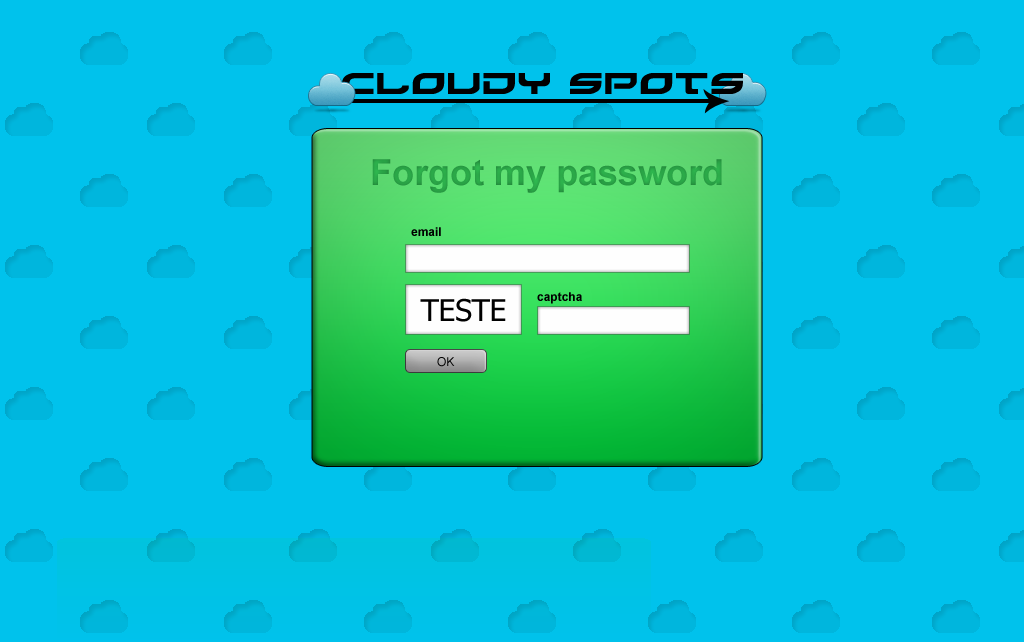
<style>
.page{position:relative;width:1024px;height:642px;background:#00c2ec}
.page>*{position:absolute;margin:0}
.t1{font:36px "Arial-BoldMT";color:#2aa547}
.t2{font:12px "Arial-BoldMT";color:#000000}
.t3{font:30px "Tahoma";color:#000000}
.t4{font:12px "ArialMT";color:#000000}
</style>
<div class="page">
<p class="t1" style="left:372px;top:159px;width:350px;height:34px">Forgot my password</p>
<p class="t2" style="left:411px;top:227px;width:30px;height:9px">email</p>
<p class="t2" style="left:537px;top:292px;width:45px;height:12px">captcha</p>
<p class="t3" style="left:420px;top:298px;width:86px;height:24px">TESTE</p>
<p class="t4" style="left:437px;top:357px;width:18px;height:10px">OK</p>
</div>
